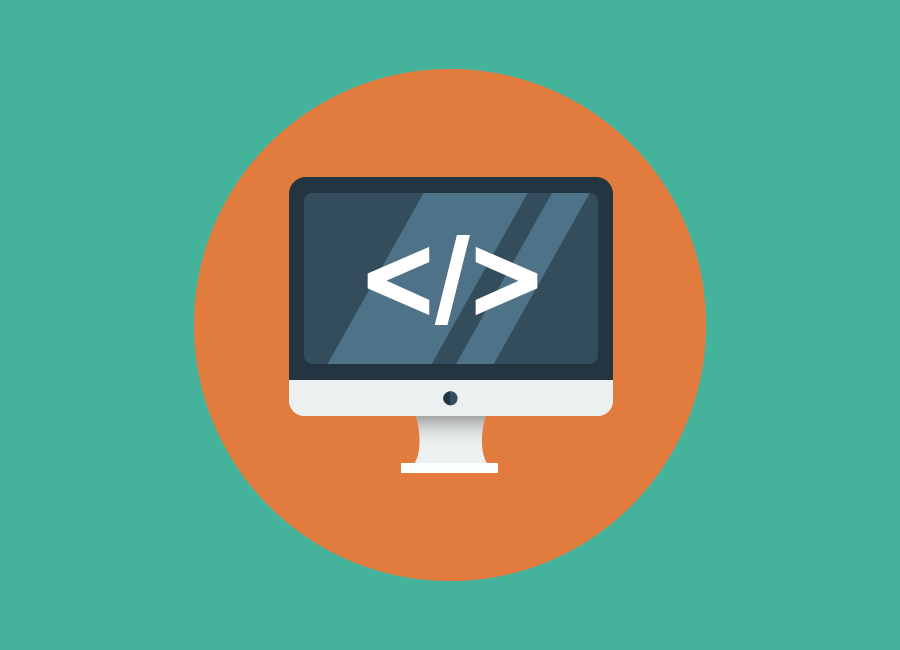
<style>
.page{position:relative;width:900px;height:650px;background:#45b39c}
.page>*{position:absolute;margin:0}
.t1{font:125px "Arial-BoldMT";color:#ffffff}
</style>
<div class="page">
<p class="t1" style="left:367px;top:235px;width:171px;height:90px">&lt;/&gt;</p>
</div>
